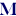
<style>
.page{position:relative;width:16px;height:16px;background:#ffffff}
.page>*{position:absolute;margin:0}
.t1{font:17.9px "EngraversMT";color:#000066}
</style>
<div class="page">
<p class="t1" style="left:0px;top:2px;width:18px;height:13px">M</p>
</div>
